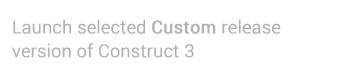
<style>
.page{position:relative;width:340px;height:80px;background:#ffffff}
.page>*{position:absolute;margin:0}
.t1{font:17.7px/23.7px "Roboto-Light";color:#afafaf;font-weight:bold}
.t2{font:17.7px/23.7px "Roboto-Regular";color:#afafaf;font-weight:bold}
</style>
<div class="page">
<p class="t1" style="left:12px;top:19px;width:269px;height:39px">Launch selected <span class="t2">Custom </span>release <br>version of Construct 3</p>
</div>
